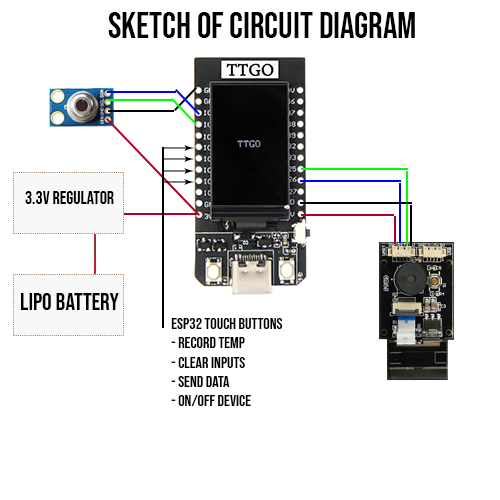
<style>
.page{position:relative;width:500px;height:500px;background:#ffffff}
.page>*{position:absolute;margin:0}
.t1{font:36px "BebasNeue-Regular";color:#000000}
.t2{font:18px "BebasNeue-Regular";color:#000000}
.t3{font:24px "BebasNeue-Regular";color:#000000}
.t4{font:16px "BebasNeue-Regular";color:#000000}
</style>
<div class="page">
<p class="t1" style="left:108px;top:12px;width:307px;height:26px">Sketch of Circuit Diagram</p>
<p class="t2" style="left:25px;top:191px;width:89px;height:13px">3.3v Regulator</p>
<p class="t3" style="left:21px;top:293px;width:98px;height:17px">Lipo Battery</p>
<p class="t4" style="left:171px;top:318px;width:112px;height:88px">ESP32 Touch Buttons<br>- Record Temp<br>- Clear Inputs<br>- Send Data<br>- On/OFF Device</p>
</div>
